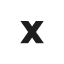
<style>
.page{position:relative;width:64px;height:64px;background:#ffffff}
.page>*{position:absolute;margin:0}
.t1{font:44px "Gilroy-ExtraBold";letter-spacing:0.05em;color:#1d1d1d}
</style>
<div class="page">
<p class="t1" style="left:20px;top:21px;width:24px;height:23px">x</p>
</div>
